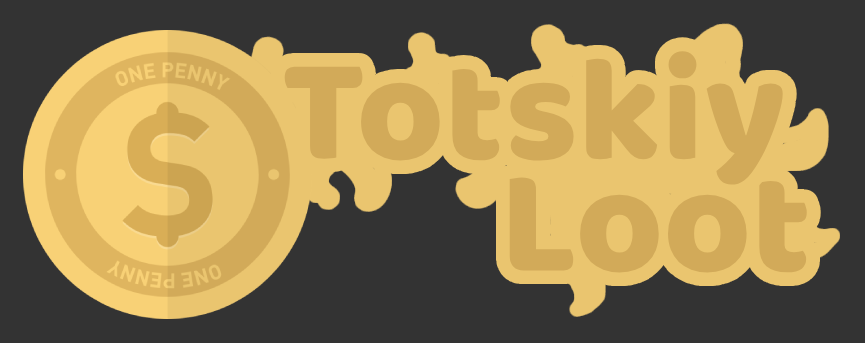
<style>
.page{position:relative;width:865px;height:343px;background:#333333}
.page>*{position:absolute;margin:0}
.t1{font:150px "Baloo";color:#d2aa59}
</style>
<div class="page">
<p class="t1" style="left:284px;top:51px;width:499px;height:134px">Totskiy</p>
<p class="t1" style="left:509px;top:177px;width:298px;height:96px">Loot</p>
</div>
